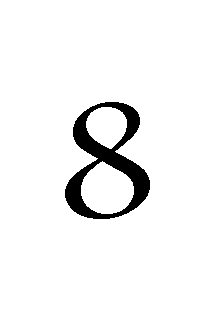
<style>
.page{position:relative;width:222px;height:323px;background:#ffffff}
.page>*{position:absolute;margin:0}
.t1{font:180px "FootlightMTLight";color:#000000}
</style>
<div class="page">
<p class="t1" style="left:65px;top:102px;width:85px;height:117px">8</p>
</div>
